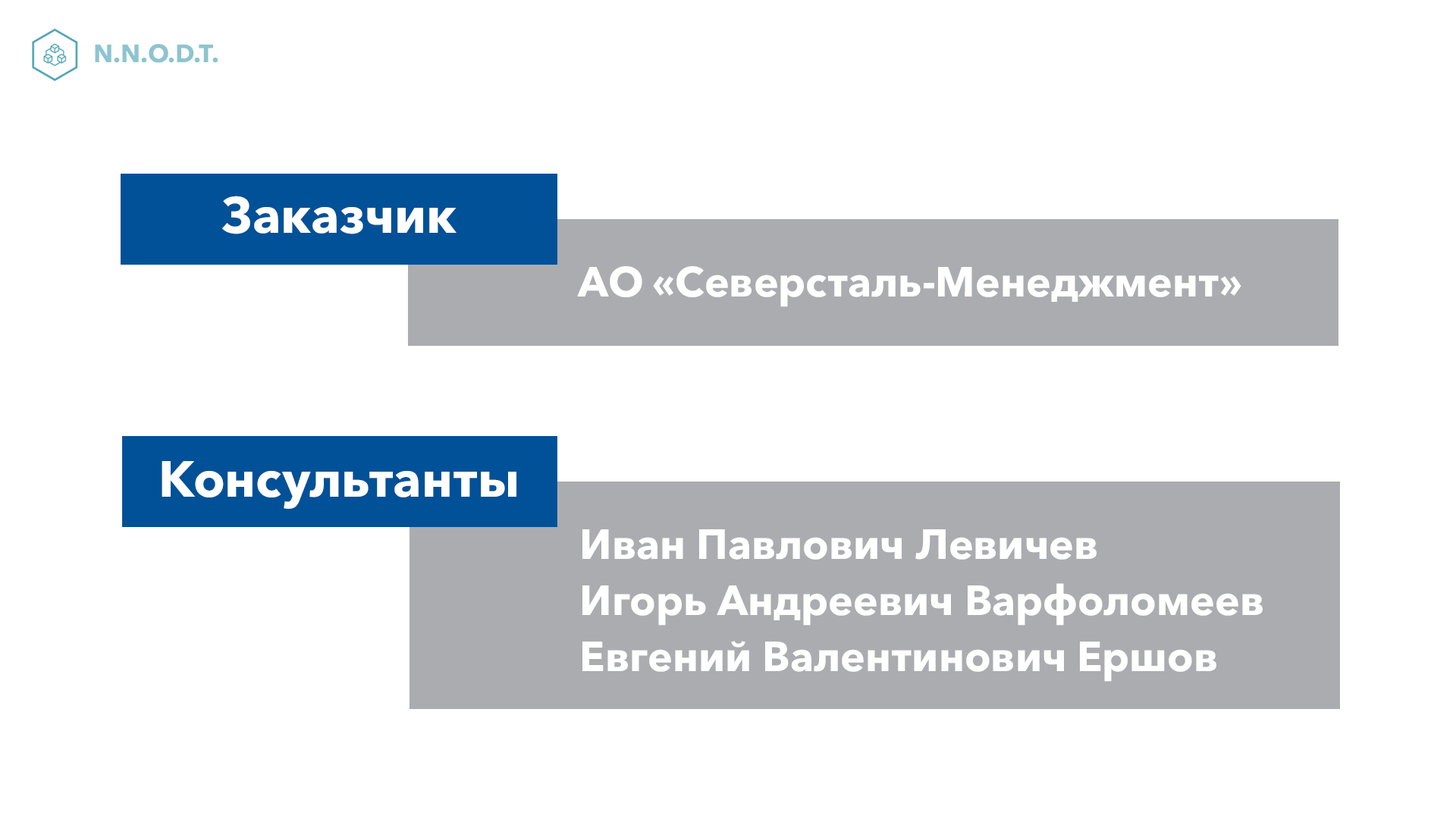
<style>
.page{position:relative;width:1456px;height:819px;background:#ffffff}
.page>*{position:absolute;margin:0}
.t1{font:25px "AvenirNextCyr-Bold";color:#8dc4d0}
.t2{font:50.2px "AvenirNextCyr-Bold";color:#ffffff}
.t3{font:41.7px "AvenirNextCyr-Bold";color:#ffffff}
.t4{font:41.7px/55.2px "AvenirNextCyr-Bold";color:#ffffff}
</style>
<div class="page">
<p class="t1" style="left:95px;top:44px;width:123px;height:19px">N.N.O.D.T.</p>
<p class="t2" style="left:222px;top:196px;width:235px;height:38px">Заказчик</p>
<p class="t3" style="left:577px;top:266px;width:664px;height:41px">АО «Северсталь-Менеджмент»</p>
<p class="t2" style="left:162px;top:461px;width:354px;height:48px">Консультанты</p>
<p class="t4" style="left:582px;top:529px;width:681px;height:153px">Иван Павлович Левичев <br>Игорь Андреевич Варфоломеев<br>Евгений Валентинович Ершов</p>
</div>
